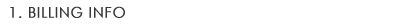
<style>
.page{position:relative;width:400px;height:24px;background:#ffffff}
.page>*{position:absolute;margin:0}
.t1{font:14.7px "FuturaBT-Light";letter-spacing:0.025em;color:#363636;text-transform:uppercase;font-weight:bold}
</style>
<div class="page">
<p class="t1" style="left:10px;top:6px;width:115px;height:12px">1. billing INFO</p>
</div>
